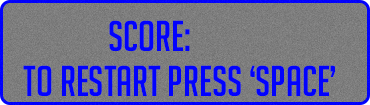
<style>
.page{position:relative;width:370px;height:105px}
.page>*{position:absolute;margin:0}
.t1{font:42px "BigNoodleTitling";color:#0202fd}
</style>
<div class="page">
<p class="t1" style="left:109px;top:20px;width:81px;height:31px">Score:</p>
<p class="t1" style="left:23px;top:65px;width:312px;height:31px">To Restart Press ‘Space’</p>
</div>
